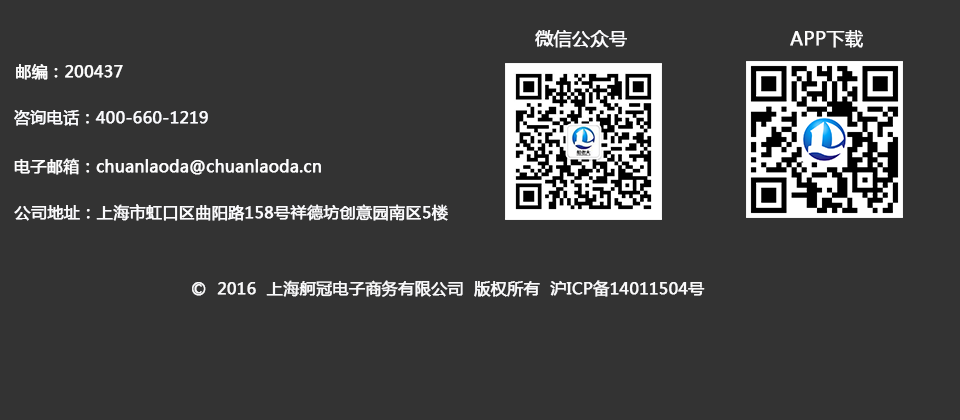
<style>
.page{position:relative;width:960px;height:420px;background:#333333}
.page>*{position:absolute;margin:0}
.t1{font:18px "MicrosoftYaHei";color:#fbfbfd;font-weight:bold}
.t2{font:18px "MicrosoftYaHei";color:#fcfcfd;font-weight:bold}
.t3{font:16px "MicrosoftYaHei";color:#fcfcfc;font-weight:bold}
.t4{font:16px "MicrosoftYaHei";color:#fafbfe;font-weight:bold}
.t5{font:16px "MicrosoftYaHei";color:#fdfdfe;font-weight:bold}
.t6{font:16px "MicrosoftYaHei";color:#fbfbfd;font-weight:bold}
.t7{font:16px "MicrosoftYaHei";color:#f9f9fa;font-weight:bold}
</style>
<div class="page">
<p class="t1" style="left:535px;top:30px;width:92px;height:18px">微信公众号</p>
<p class="t2" style="left:790px;top:30px;width:73px;height:18px">APP下载</p>
<p class="t3" style="left:16px;top:64px;width:107px;height:16px">邮编：200437</p>
<p class="t4" style="left:14px;top:110px;width:194px;height:16px">咨询电话：400-660-1219</p>
<p class="t5" style="left:14px;top:158px;width:307px;height:17px">电子邮箱：chuanlaoda@chuanlaoda.cn</p>
<p class="t6" style="left:14px;top:204px;width:434px;height:17px">公司地址：上海市虹口区曲阳路158号祥德坊创意园南区5楼</p>
<p class="t7" style="left:192px;top:280px;width:513px;height:17px">©  2016  上海舸冠电子商务有限公司  版权所有  沪ICP备14011504号</p>
</div>
